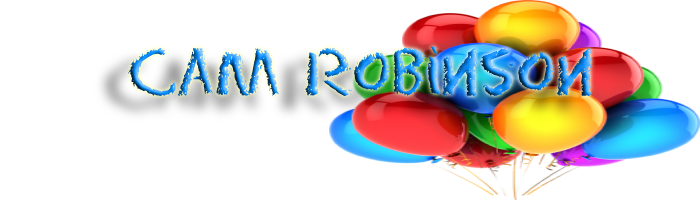
<style>
.page{position:relative;width:700px;height:200px;background:#ffffff}
.page>*{position:absolute;margin:0}
.t1{font:60px "Eraser-Regular"}
</style>
<div class="page">
<p class="t1" style="left:128px;top:46px;width:464px;height:50px">Cam Robinson</p>
</div>
